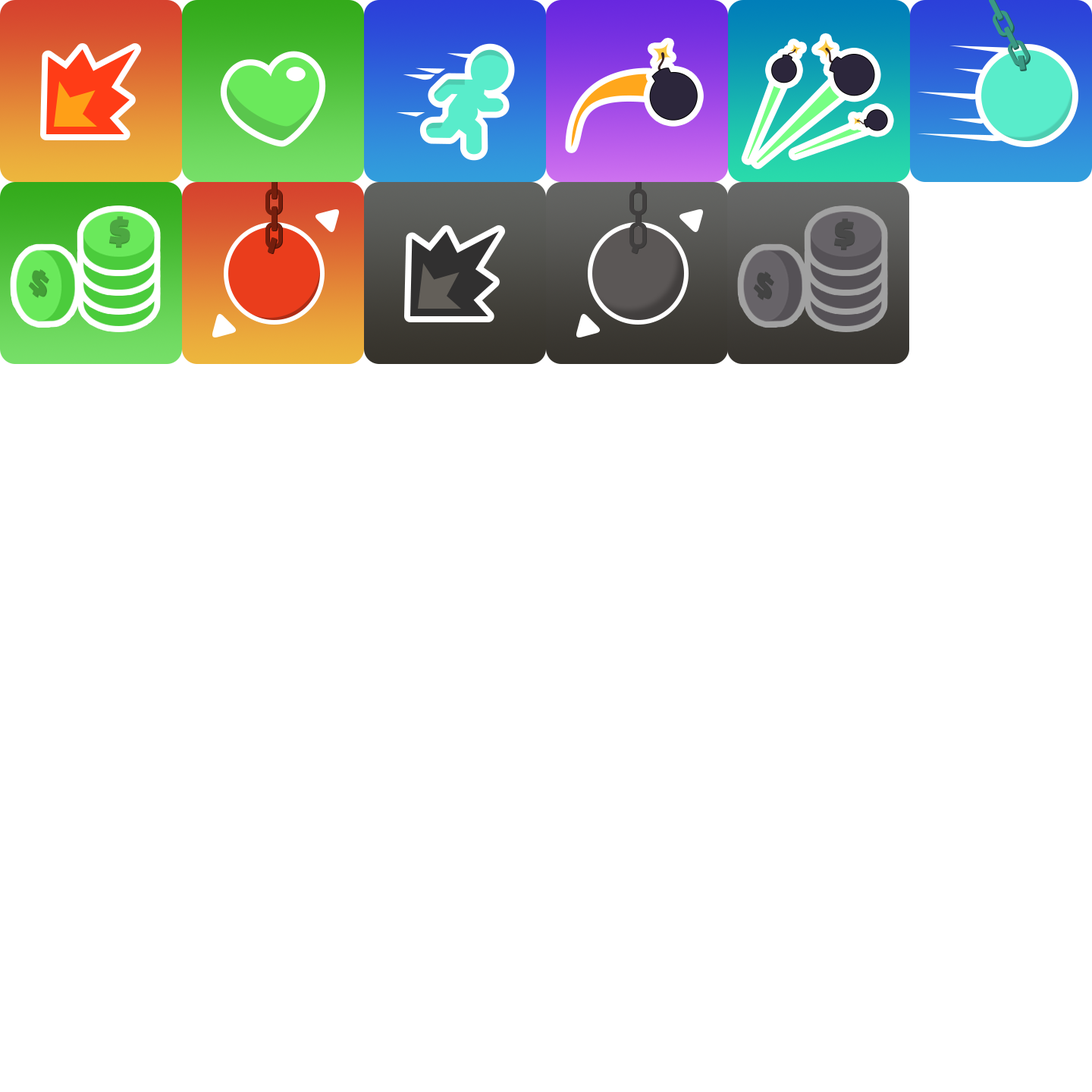
<style>
.page{position:relative;width:1092px;height:1092px;background:#ffffff}
.page>*{position:absolute;margin:0}
.t1{font:36.5px "ChangaOne";letter-spacing:0.04em;color:#3f9634;scale:1.18 1}
.t2{font:36.5px "ChangaOne";letter-spacing:0.04em;color:#4da742;scale:1.18 1}
.t3{font:32.4px "ChangaOne";letter-spacing:0.04em;color:#449f38;scale:1.24 1}
.t4{font:32.4px "ChangaOne";letter-spacing:0.04em;color:#3f9634;scale:1.24 1}
</style>
<div class="page">
<p class="t1" style="left:109px;top:218px;width:21px;height:30px">$</p>
<p class="t2" style="left:109px;top:216px;width:21px;height:30px">$</p>
<p class="t3" style="left:28px;top:269px;width:20px;height:28px;rotate:39deg">$</p>
<p class="t4" style="left:30px;top:270px;width:19px;height:28px;rotate:39deg">$</p>
</div>
